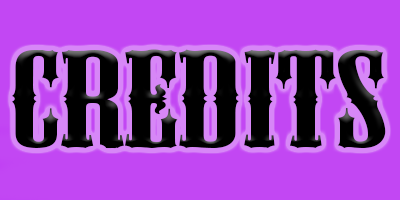
<style>
.page{position:relative;width:400px;height:200px;background:#c247f3}
.page>*{position:absolute;margin:0}
.t1{font:128.5px "MesquiteStd";color:#000000;scale:1.71 1}
</style>
<div class="page">
<p class="t1" style="left:12px;top:49px;width:374px;height:100px">CREDITS</p>
</div>
